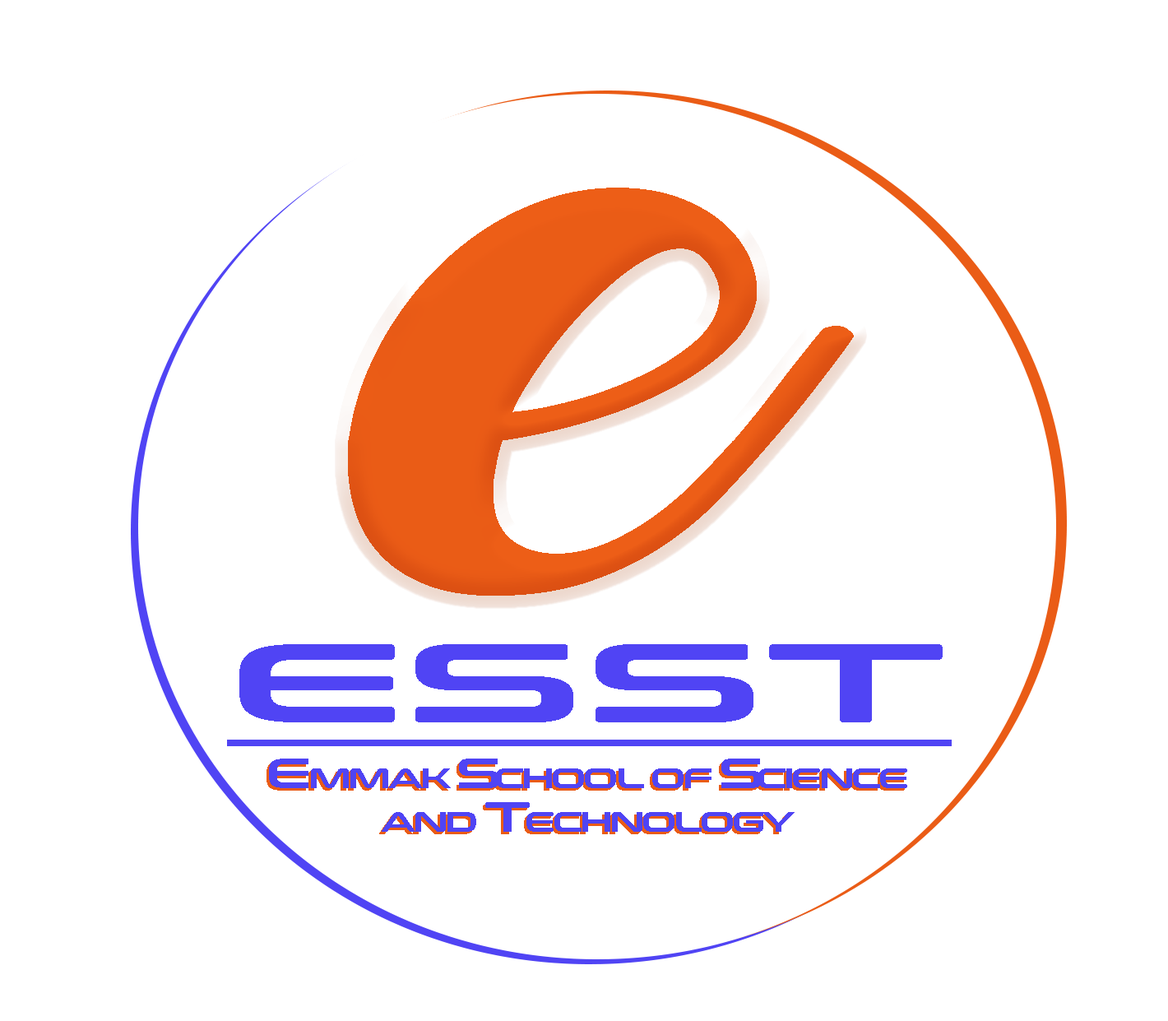
<style>
.page{position:relative;width:1168px;height:1021px;background:#ffffff}
.page>*{position:absolute;margin:0}
.t1{font:506.9px "Amarillo";letter-spacing:0.02em;color:#ed5e17;scale:1.51 1}
.t2{font:111.4px "ConthraxSb-Regular";letter-spacing:0.02em;color:#5044f4;text-decoration:underline;scale:1.87 1}
.t3{font:28.5px/43.9px "ConthraxSb-Regular";letter-spacing:-0.08em;scale:1.25 1}
.t4{font:42.4px/43.9px "ConthraxSb-Regular";letter-spacing:-0.08em;scale:1.25 1}
.t5{font:28.5px/43.9px "ConthraxSb-Regular";letter-spacing:-0.08em;color:#5044f4;scale:1.25 1}
.t6{font:42.4px/43.9px "ConthraxSb-Regular";letter-spacing:-0.08em;color:#5044f4;scale:1.25 1}
</style>
<div class="page">
<p class="t1" style="left:348px;top:188px;width:506px;height:408px">e</p>
<p class="t2" style="left:227px;top:644px;width:725px;height:102px">ESST</p>
<p class="t3" style="left:267px;top:761px;width:638px;height:73px;text-align:center"><span class="t4">E</span>MMAK <span class="t4">S</span>CHOOL OF <span class="t4">S</span>CIENCE<br>AND <span class="t4">T</span>ECHNOLOGY</p>
<p class="t5" style="left:269px;top:758px;width:638px;height:74px;text-align:center"><span class="t6">E</span>MMAK <span class="t6">S</span>CHOOL OF <span class="t6">S</span>CIENCE<br>AND <span class="t6">T</span>ECHNOLOGY</p>
</div>
